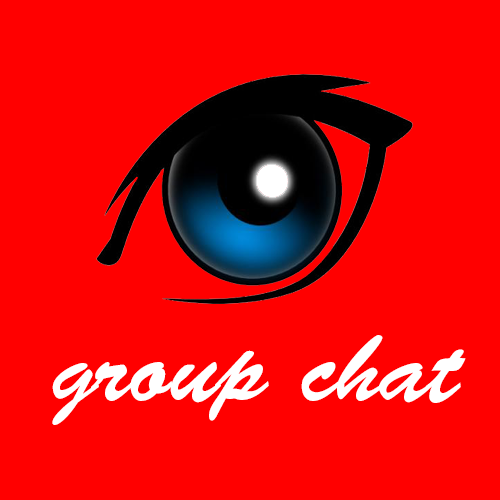
<style>
.page{position:relative;width:500px;height:500px;background:#ff0000}
.page>*{position:absolute;margin:0}
.t1{font:100px "BrushScriptStd";color:#ffffff}
</style>
<div class="page">
<p class="t1" style="left:52px;top:335px;width:414px;height:90px">group chat</p>
</div>
